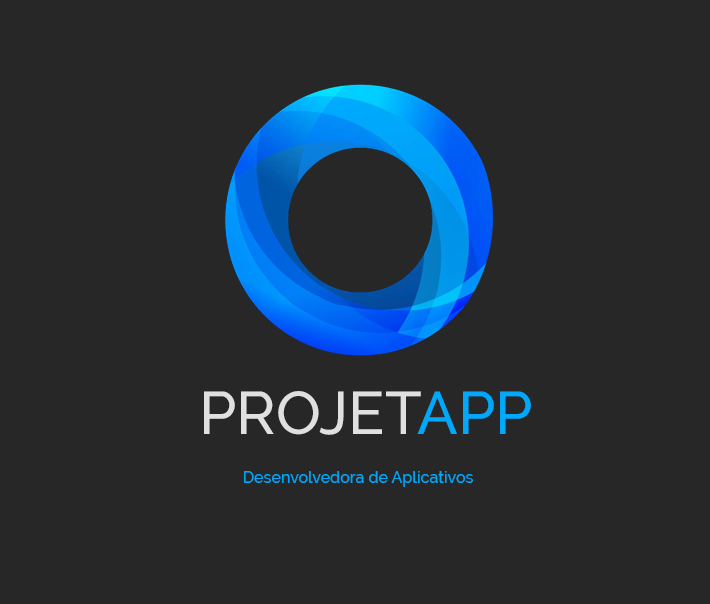
<style>
.page{position:relative;width:710px;height:604px;background:#272727}
.page>*{position:absolute;margin:0}
.t1{font:60px "Raleway-Medium";color:#e0e0e0}
.t2{font:60px "Raleway-Medium";color:#00a8fb}
.t3{font:16px "Raleway-Medium";color:#00a8fb}
</style>
<div class="page">
<p class="t1" style="left:204px;top:391px;width:327px;height:44px">PROJET<span class="t2">APP</span></p>
<p class="t3" style="left:244px;top:471px;width:229px;height:16px">Desenvolvedora de Aplicativos</p>
</div>
